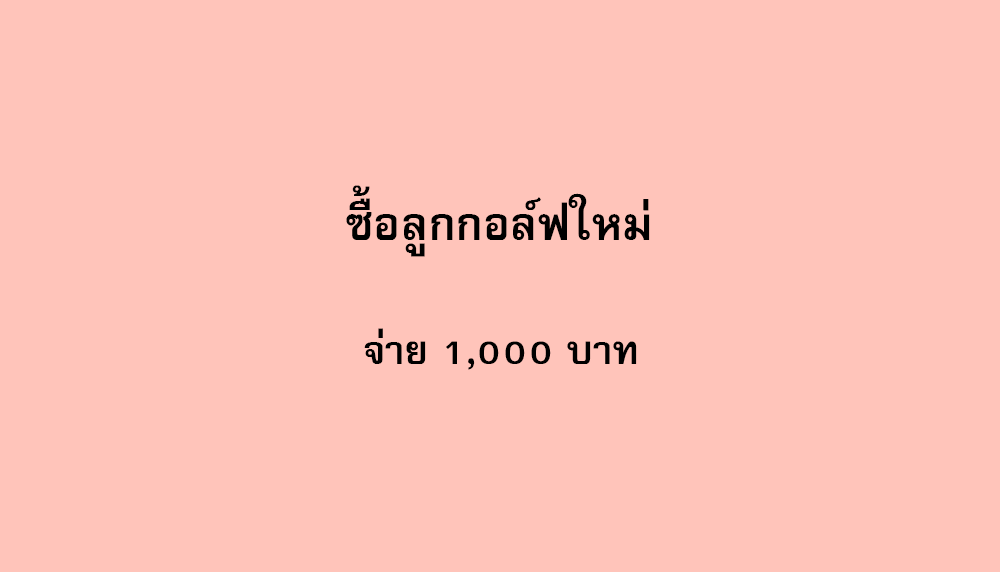
<style>
.page{position:relative;width:1000px;height:572px;background:#ffc4ba}
.page>*{position:absolute;margin:0}
.t1{font:64px "FreesiaUPCBold";color:#000000}
.t2{font:56px "FreesiaUPCBold";color:#000000}
</style>
<div class="page">
<p class="t1" style="left:346px;top:185px;width:304px;height:72px">ซื้อลูกกอล์ฟใหม่</p>
<p class="t2" style="left:364px;top:328px;width:273px;height:42px">จ่าย 1,000 บาท</p>
</div>
